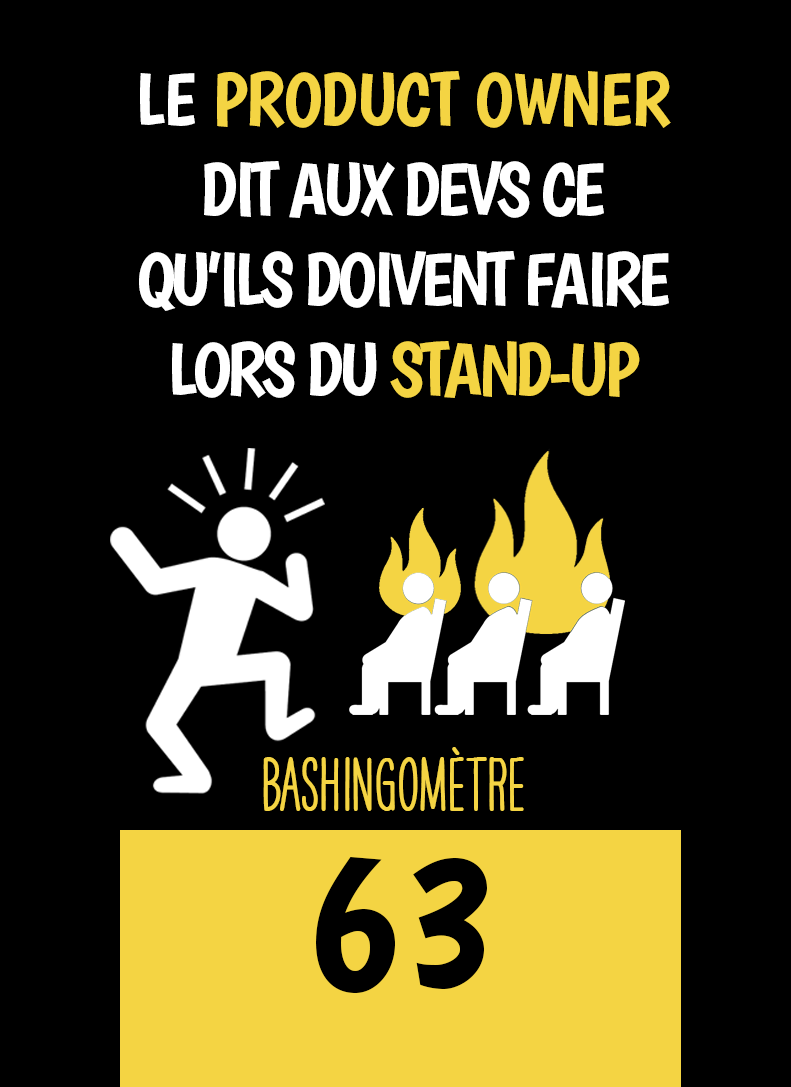
<style>
.page{position:relative;width:791px;height:1087px;background:#000000}
.page>*{position:absolute;margin:0}
.t1{font:75px "Boogaloo-Regular";letter-spacing:-0.06em;color:#ffffff}
.t2{font:75px "Boogaloo-Regular";letter-spacing:-0.02em;color:#ffffff}
.t3{font:75px "Boogaloo-Regular";letter-spacing:-0.02em;color:#f4d443}
.t4{font:75px "Boogaloo-Regular";letter-spacing:-0.06em;color:#f4d443}
.t5{font:66.7px "HAVEANICEDAYTallW04-Bold";color:#f4d443}
.t6{font:200px "Boogaloo-Regular";color:#000000}
</style>
<div class="page">
<p class="t1" style="left:139px;top:71px;width:532px;height:327px;text-align:center"><span class="t2">LE </span><span class="t3">PRODUCT OWNER<br></span>DIT AUX DEVS CE QU’ILS DOIVENT FAIRE LORS DU <span class="t4">STAND-UP</span></p>
<p class="t5" style="left:263px;top:747px;width:261px;height:64px">BASHINgomètre</p>
<p class="t6" style="left:316px;top:857px;width:171px;height:136px">63</p>
</div>
